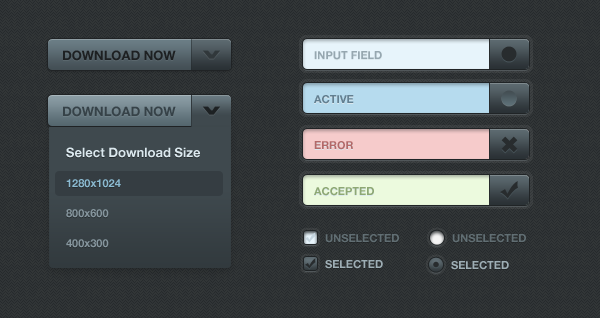
<style>
.page{position:relative;width:600px;height:318px;background:#303436}
.page>*{position:absolute;margin:0}
.t1{font:13px "HelveticaNeue-Bold";color:#1d2022;text-transform:uppercase}
.t2{font:11px "HelveticaNeue-Bold";color:#96a7b0;text-transform:uppercase}
.t3{font:11px "HelveticaNeue-Bold";color:#627f91;text-transform:uppercase}
.t4{font:13px "HelveticaNeue-Bold";color:#364248;text-transform:uppercase}
.t5{font:13px/30px "HelveticaNeue-Bold";color:#dbe8ee}
.t6{font:11px/30px "HelveticaNeue-Bold";color:#8bbad1}
.t7{font:11px/30px "HelveticaNeue-Bold";color:#86969e}
.t8{font:11px "HelveticaNeue-Bold";color:#b36969;text-transform:uppercase}
.t9{font:11px "HelveticaNeue-Bold";color:#8ea874;text-transform:uppercase}
.t10{font:11px "HelveticaNeue-Bold";color:#616e73;text-transform:uppercase}
.t11{font:11px "HelveticaNeue-Bold";color:#9eaeb5;text-transform:uppercase}
</style>
<div class="page">
<p class="t1" style="left:63px;top:50px;width:113px;height:11px">Download Now</p>
<p class="t2" style="left:314px;top:51px;width:68px;height:9px">Input Field</p>
<p class="t3" style="left:314px;top:95px;width:40px;height:9px">Active</p>
<p class="t4" style="left:63px;top:106px;width:113px;height:11px">Download Now</p>
<p class="t5" style="left:66px;top:147px;width:134px;height:101px">Select Download Size<br><span class="t6">1280x1024<br></span><span class="t7">800x600<br>400x300</span></p>
<p class="t8" style="left:314px;top:141px;width:39px;height:9px">Error</p>
<p class="t9" style="left:314px;top:187px;width:60px;height:9px">Accepted</p>
<p class="t10" style="left:325px;top:234px;width:74px;height:9px">Unselected</p>
<p class="t10" style="left:452px;top:234px;width:74px;height:9px">UnSelected</p>
<p class="t11" style="left:325px;top:260px;width:58px;height:9px">Selected</p>
<p class="t11" style="left:451px;top:261px;width:58px;height:9px">Selected</p>
</div>
